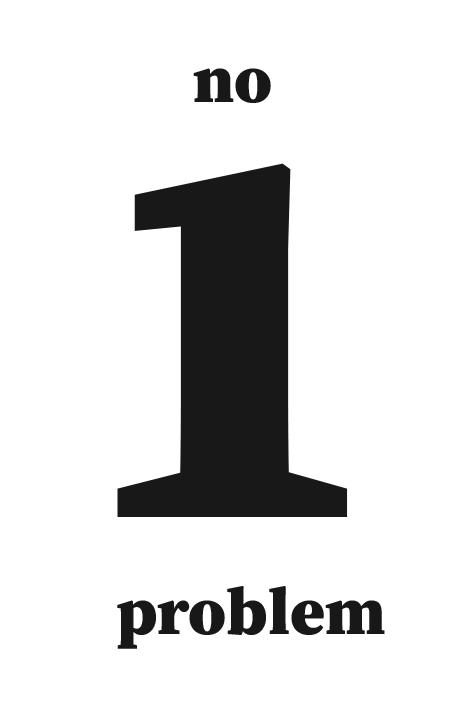
<style>
.page{position:relative;width:464px;height:716px;background:#ffffff}
.page>*{position:absolute;margin:0}
.t1{font:66.7px "SourceSerifRoman-Black";color:#181818}
.t2{font:555.6px "SourceSerifRoman-Black";color:#181818}
</style>
<div class="page">
<p class="t1" style="left:193px;top:68px;width:78px;height:35px">no</p>
<p class="t2" style="left:117px;top:163px;width:231px;height:354px">1</p>
<p class="t1" style="left:117px;top:586px;width:268px;height:63px">problem</p>
</div>
